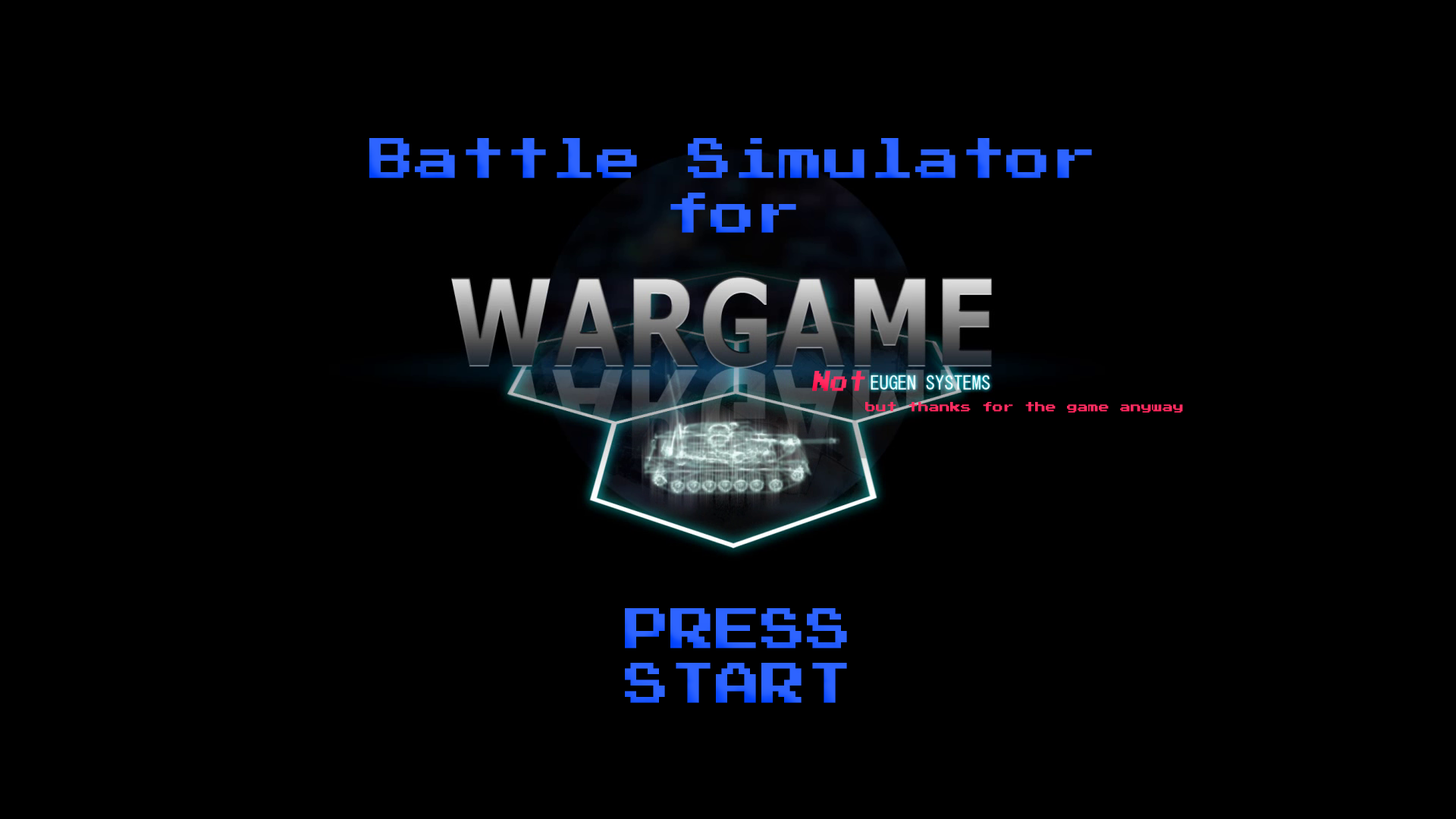
<style>
.page{position:relative;width:1456px;height:819px;background:#000000}
.page>*{position:absolute;margin:0}
.t1{font:45.5px "PressStart2P";color:#2c63ff}
.t2{font:23px "PressStart2P";color:#ff2d62;scale:0.77 1}
.t3{font:10.6px "PressStart2P";color:#ff2d62}
.t4{font:45.5px "PressStart2P";color:#2d63ff}
</style>
<div class="page">
<p class="t1" style="left:369px;top:138px;width:723px;height:95px;text-align:center">Battle Simulator<br>for</p>
<p class="t2" style="left:812px;top:371px;width:53px;height:20px">Not</p>
<p class="t3" style="left:865px;top:402px;width:318px;height:11px">but thanks for the game anyway</p>
<p class="t4" style="left:625px;top:608px;width:222px;height:95px;text-align:center">PRESS START</p>
</div>
